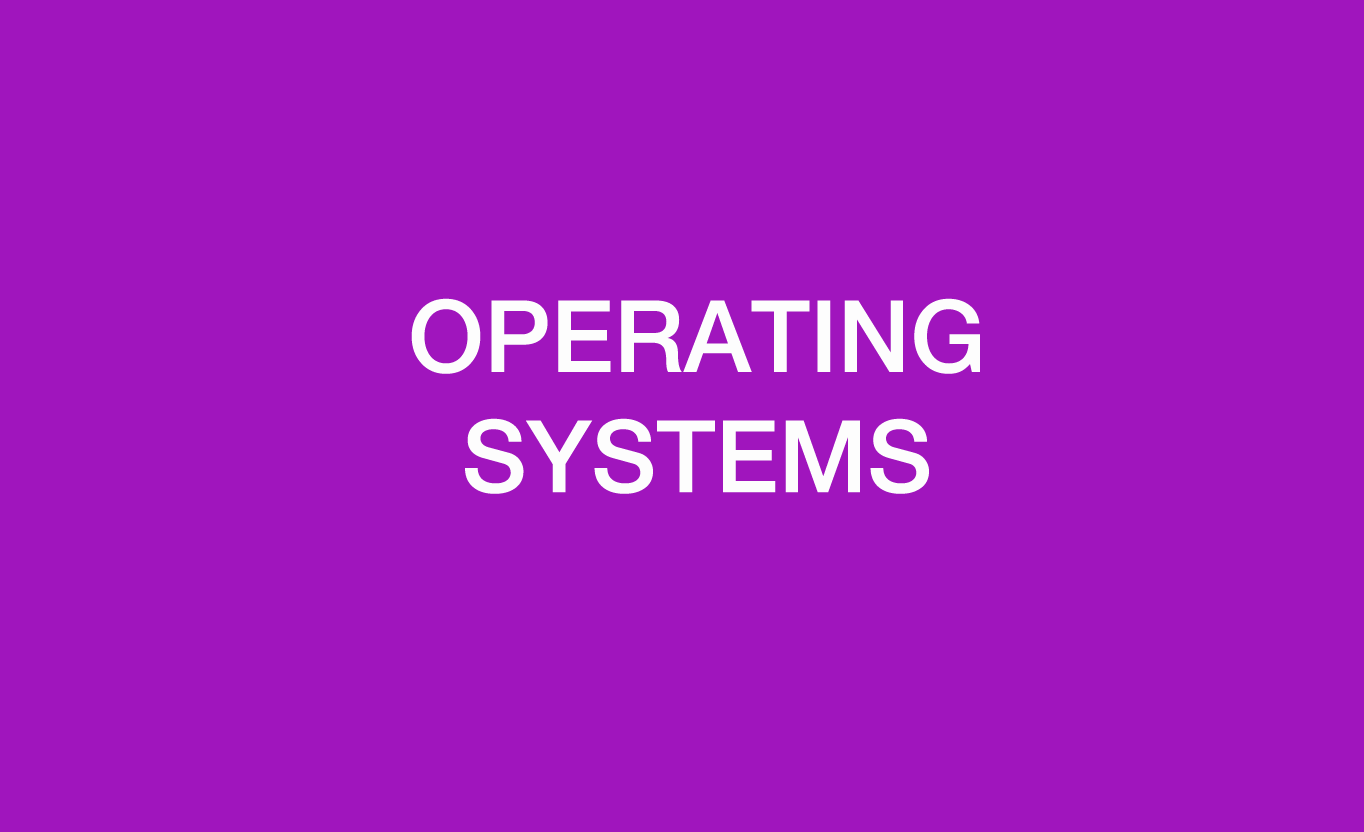
<style>
.page{position:relative;width:1364px;height:832px;background:#a015bd}
.page>*{position:absolute;margin:0}
.t1{font:100px "HelveticaNeueMedium";color:#fdfdfd}
</style>
<div class="page">
<p class="t1" style="left:411px;top:298px;width:569px;height:196px;text-align:center">OPERATING<br>SYSTEMS</p>
</div>
